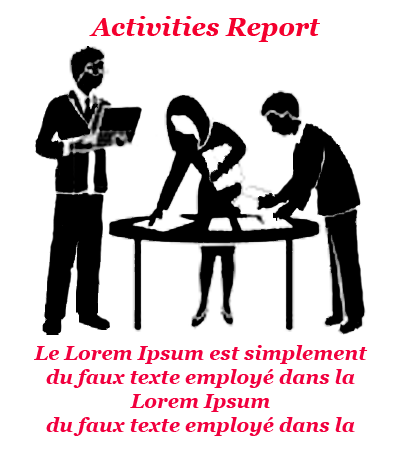
<style>
.page{position:relative;width:400px;height:450px;background:#ffffff}
.page>*{position:absolute;margin:0}
.t1{font:26px "Georgia-BoldItalic";color:#f4002e}
.t2{font:20px "Georgia-BoldItalic";color:#f1003e}
</style>
<div class="page">
<p class="t1" style="left:89px;top:16px;width:231px;height:26px">Activities Report</p>
<p class="t2" style="left:34px;top:345px;width:334px;height:91px;text-align:center">Le Lorem Ipsum est simplement du faux texte employé dans la Lorem Ipsum <br>du faux texte employé dans la</p>
</div>
